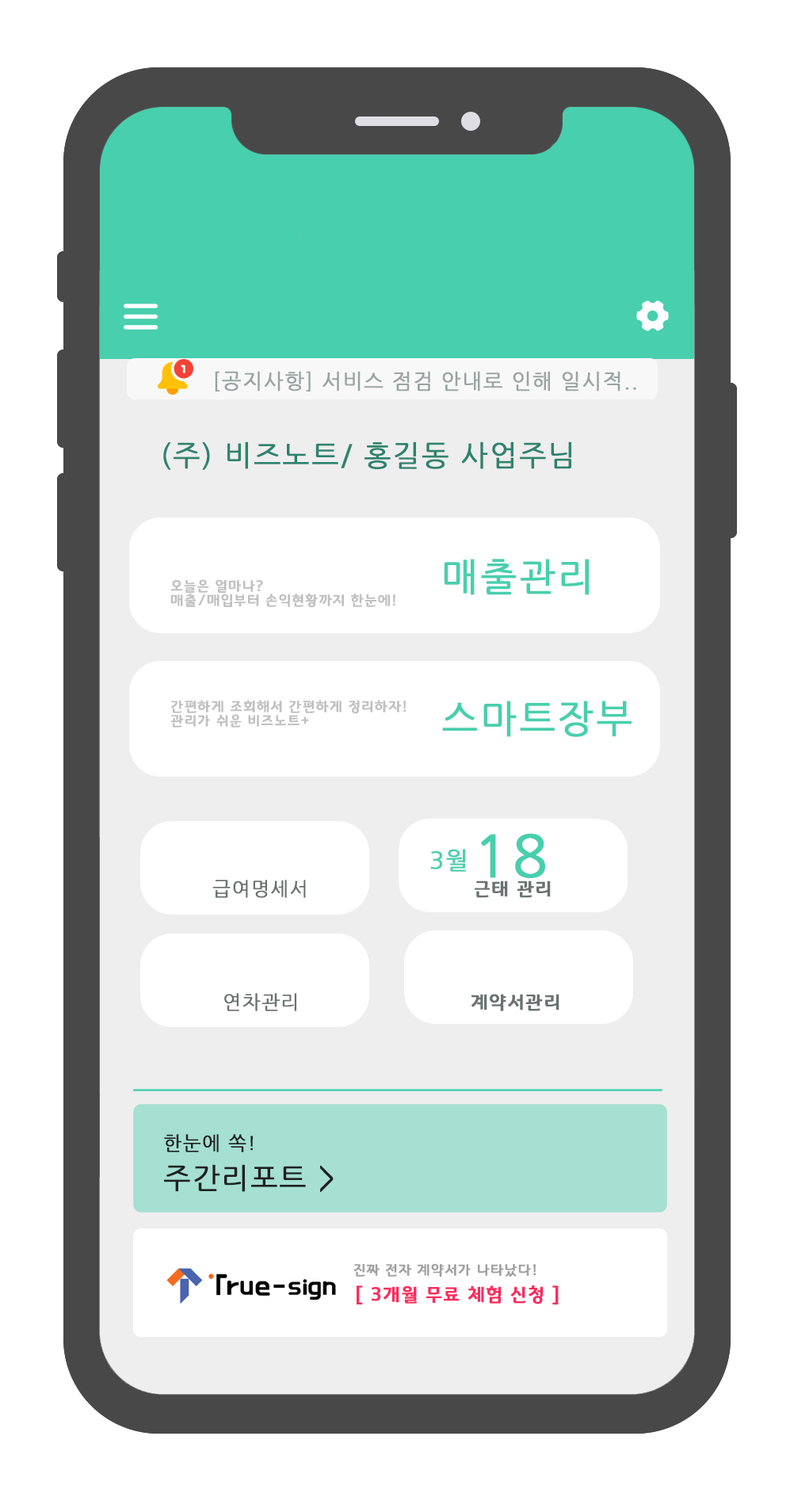
<style>
.page{position:relative;width:794px;height:1501px;background:#ffffff}
.page>*{position:absolute;margin:0}
.t1{font:20.6px "NanumGothic";letter-spacing:0.05em;color:#9aa4a2;font-weight:bold}
.t2{font:28.5px "NanumGothic";letter-spacing:0.05em;color:#2e836e;font-weight:bold}
.t3{font:38px "NanumGothic";letter-spacing:0.05em;color:#48cfae;font-weight:bold}
.t4{font:14.3px/14.3px "GyeonggiTitleM";letter-spacing:0.05em;color:#c0c0c0;font-weight:bold}
.t5{font:57.1px "NanumGothic";letter-spacing:0.05em;color:#48cfae;font-weight:bold}
.t6{font:23.8px "NanumGothic";letter-spacing:0.05em;color:#48cfae;font-weight:bold}
.t7{font:19px "NanumGothic";letter-spacing:0.05em;color:#697371;font-weight:bold}
.t8{font:19px "GyeonggiTitleM";letter-spacing:0.05em;color:#697371;font-weight:bold}
.t9{font:28.5px/38px "NanumGothic";letter-spacing:0.05em;color:#1f2120;font-weight:bold}
.t10{font:19px/23.8px "NanumGothic";letter-spacing:0.05em;color:#1f2120;font-weight:bold}
.t11{font:14.3px "GyeonggiTitleM";letter-spacing:0.05em;color:#a0a1a0;font-weight:bold}
.t12{font:19px "GyeonggiTitleM";letter-spacing:0.05em;color:#fc2b5d;font-weight:bold}
</style>
<div class="page">
<p class="t1" style="left:215px;top:371px;width:422px;height:21px">[공지사항] 서비스 점검 안내로 인해 일시적..</p>
<p class="t2" style="left:163px;top:442px;width:409px;height:28px">(주) 비즈노트/ 홍길동 사업주님</p>
<p class="t3" style="left:444px;top:559px;width:145px;height:36px">매출관리</p>
<p class="t4" style="left:170px;top:579px;width:226px;height:29px">오늘은 얼마나?<br>매출/매입부터 손익현황까지 한눈에!</p>
<p class="t4" style="left:170px;top:700px;width:236px;height:28px">간편하게 조회해서 간편하게 정리하자!<br>관리가 쉬운 비즈노트+</p>
<p class="t3" style="left:442px;top:701px;width:190px;height:36px">스마트장부</p>
<p class="t5" style="left:481px;top:834px;width:64px;height:44px">18</p>
<p class="t6" style="left:430px;top:849px;width:36px;height:23px">3월</p>
<p class="t7" style="left:212px;top:880px;width:94px;height:18px">급여명세서</p>
<p class="t8" style="left:475px;top:881px;width:76px;height:17px">근태 관리</p>
<p class="t7" style="left:224px;top:993px;width:72px;height:18px">연차관리</p>
<p class="t8" style="left:472px;top:994px;width:88px;height:17px">계약서관리</p>
<p class="t9" style="left:164px;top:1134px;width:170px;height:58px"><span class="t10">한눈에 쏙!<br></span>주간리포트 &gt;</p>
<p class="t11" style="left:354px;top:1264px;width:182px;height:13px">진짜 전자 계약서가 나타났다!</p>
<p class="t12" style="left:357px;top:1285px;width:202px;height:20px">[ 3개월 무료 체험 신청 ]</p>
</div>
